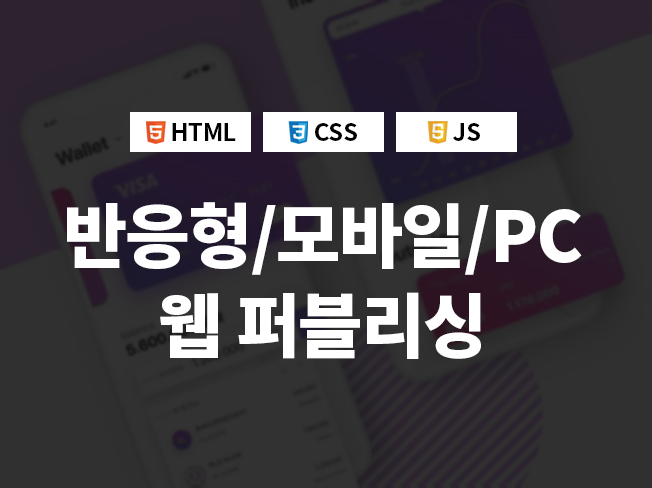
<style>
.page{position:relative;width:652px;height:488px}
.page>*{position:absolute;margin:0}
.t1{font:24px "NotoSansCJKkr-Bold";letter-spacing:-0.02em;color:#000000}
.t2{font:70px/90px "NotoSansCJKkr-Black";letter-spacing:-0.02em;color:#ffffff}
</style>
<div class="page">
<p class="t1" style="left:172px;top:123px;width:64px;height:18px">HTML</p>
<p class="t1" style="left:315px;top:123px;width:42px;height:18px">CSS</p>
<p class="t1" style="left:453px;top:123px;width:27px;height:18px">JS</p>
<p class="t2" style="left:67px;top:202px;width:515px;height:157px;text-align:center">반응형/모바일/PC<br>웹 퍼블리싱</p>
</div>
